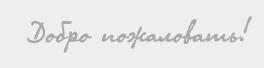
<style>
.page{position:relative;width:264px;height:68px;background:#eeeeee}
.page>*{position:absolute;margin:0}
.t1{font:31px "OlgaCTT";color:#aaaaaa}
</style>
<div class="page">
<p class="t1" style="left:27px;top:16px;width:225px;height:37px">Добро пожаловать!</p>
</div>
